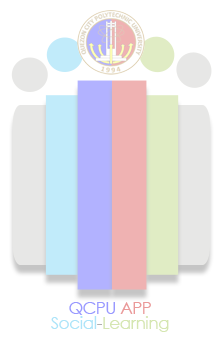
<style>
.page{position:relative;width:220px;height:338px;background:#ffffff}
.page>*{position:absolute;margin:0}
.t1{font:16.7px/15px "CenturyGothic";letter-spacing:-0.02em}
</style>
<div class="page">
<p class="t1" style="left:51px;top:302px;width:118px;height:30px;text-align:center">QCPU APP<br>Social-Learning</p>
</div>
